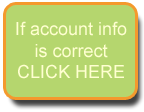
<style>
.page{position:relative;width:144px;height:112px;background:#b5d66e}
.page>*{position:absolute;margin:0}
.t1{font:18px "ArialMT";color:#ffffd1}
</style>
<div class="page">
<p class="t1" style="left:16px;top:21px;width:111px;height:58px;text-align:center">If account info <br>is correct<br>CLICK HERE</p>
</div>
